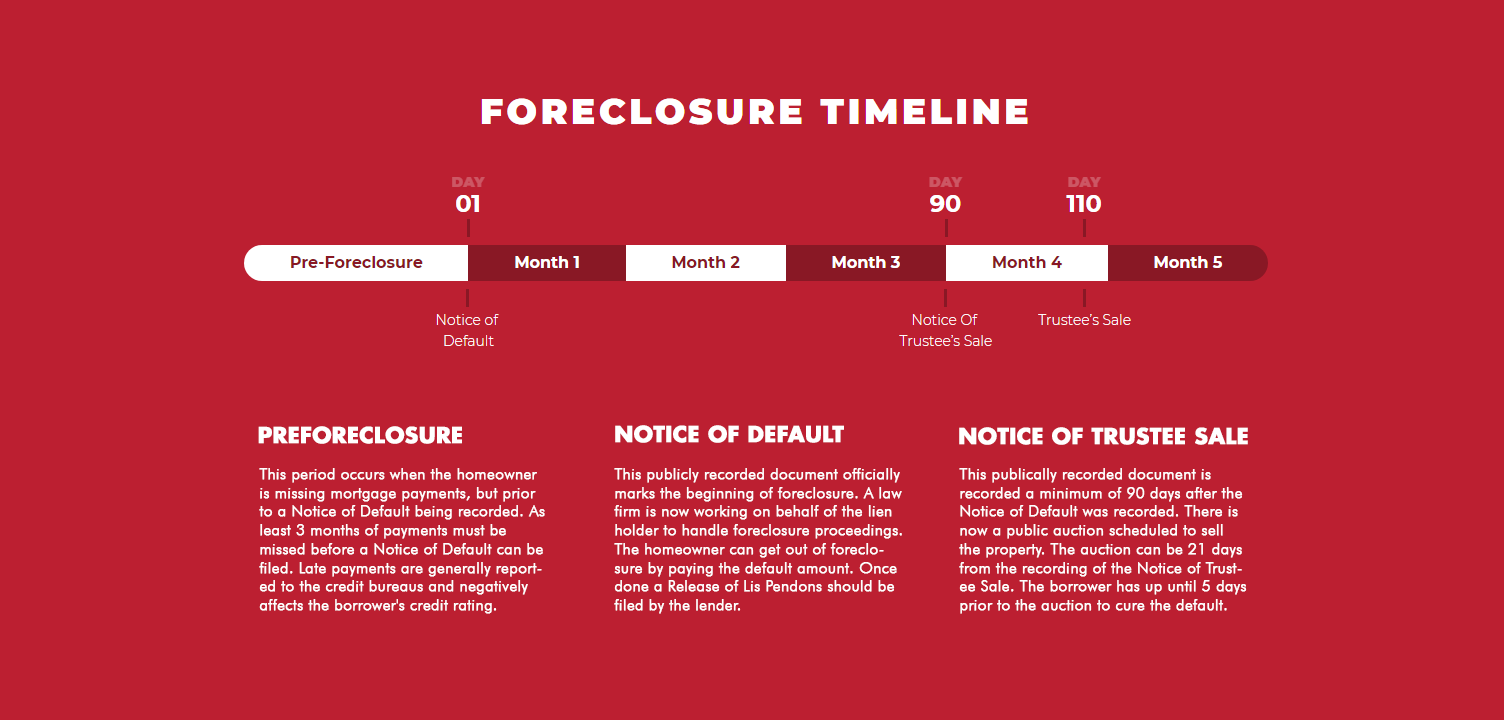
<style>
.page{position:relative;width:1504px;height:720px;background:#bc1f31}
.page>*{position:absolute;margin:0}
.t1{font:21.4px "Futura-Bold";color:#ffffff;font-weight:bold}
.t2{font:15.6px "FuturaBT-Light";color:#ffffff;font-weight:bold}
</style>
<div class="page">
<p class="t1" style="left:615px;top:425px;width:229px;height:18px">NOTICE OF DEFAULT</p>
<p class="t1" style="left:258px;top:426px;width:204px;height:18px">PREFORECLOSURE</p>
<p class="t1" style="left:959px;top:427px;width:289px;height:18px">NOTICE OF TRUSTEE SALE</p>
<p class="t2" style="left:259px;top:468px;width:286px;height:146px">This period occurs when the homeowner is missing mortgage payments, but prior to a Notice of Default being recorded. As least 3 months of payments must be missed before a Notice of Default can be filed. Late payments are generally reported to the credit bureaus and negatively affects the borrower's credit rating.</p>
<p class="t2" style="left:614px;top:468px;width:288px;height:146px">This publicly recorded document officially marks the beginning of foreclosure. A law firm is now working on behalf of the lien holder to handle foreclosure proceedings. The homeowner can get out of foreclosure by paying the default amount. Once done a Release of Lis Pendons should be filed by the lender.</p>
<p class="t2" style="left:959px;top:468px;width:288px;height:146px">This publically recorded document is recorded a minimum of 90 days after the Notice of Default was recorded. There is now a public auction scheduled to sell the property. The auction can be 21 days from the recording of the Notice of Trustee Sale. The borrower has up until 5 days prior to the auction to cure the default.</p>
</div>
